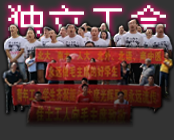
<style>
.page{position:relative;width:174px;height:140px}
.page>*{position:absolute;margin:0}
.t1{font:41.2px "HYPixel-11px-U"}
</style>
<div class="page">
<p class="t1" style="left:8px;top:5px;width:158px;height:35px">独立工会</p>
</div>
